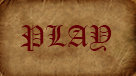
<style>
.page{position:relative;width:136px;height:76px}
.page>*{position:absolute;margin:0}
.t1{font:30px "OldEnglishTextMT";color:#630005}
</style>
<div class="page">
<p class="t1" style="left:20px;top:25px;width:92px;height:26px">PLAY</p>
</div>
